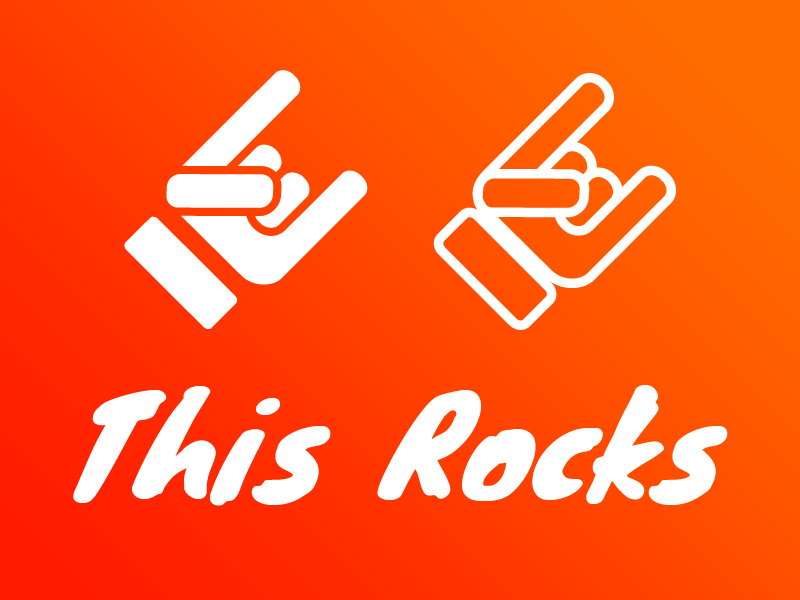
<style>
.page{position:relative;width:800px;height:600px}
.page>*{position:absolute;margin:0}
.t1{font:132px "Knewave";color:#ffffff}
</style>
<div class="page">
<p class="t1" style="left:73px;top:385px;width:655px;height:121px">This Rocks</p>
</div>
